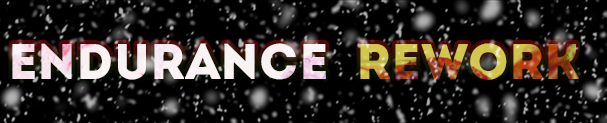
<style>
.page{position:relative;width:607px;height:123px;background:#000000}
.page>*{position:absolute;margin:0}
.t1{font:50px "Intro"}
</style>
<div class="page">
<p class="t1" style="left:12px;top:43px;width:567px;height:37px">Endurance  Rework</p>
</div>
